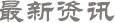
<style>
.page{position:relative;width:115px;height:23px;background:#ffffff}
.page>*{position:absolute;margin:0}
.t1{font:30px "STLiti";color:#807a7a}
</style>
<div class="page">
<p class="t1" style="left:0px;top:0px;width:115px;height:23px">最新资讯</p>
</div>
